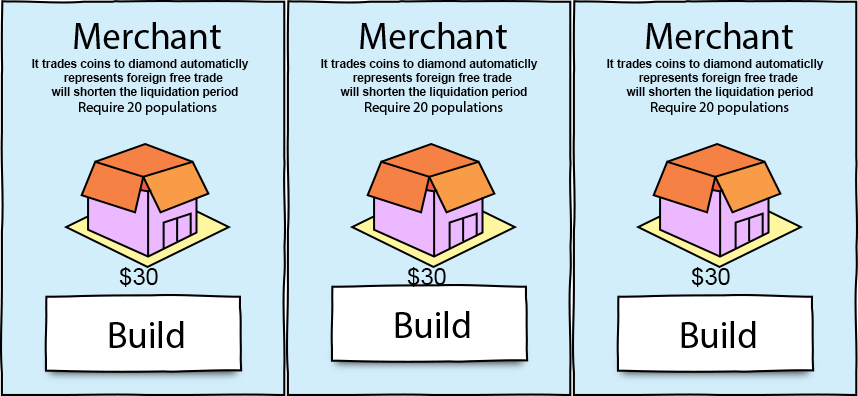
<style>
.page{position:relative;width:858px;height:396px;background:#d3eefb}
.page>*{position:absolute;margin:0}
.t1{font:12px "Arial-BoldMT";color:#000000}
.t2{font:24px "ArialMT";color:#000000}
</style>
<div class="page">
<p class="t1" style="left:32px;top:59px;width:217px;height:39px;text-align:center">It trades coins to diamond automaticlly <br>            represents foreign free trade<br>             will shorten the liquidation period</p>
<p class="t1" style="left:321px;top:59px;width:217px;height:39px;text-align:center">It trades coins to diamond automaticlly <br>            represents foreign free trade<br>             will shorten the liquidation period</p>
<p class="t1" style="left:607px;top:59px;width:217px;height:39px;text-align:center">It trades coins to diamond automaticlly<br>            represents foreign free trade<br>             will shorten the liquidation period</p>
<p class="t2" style="left:119px;top:267px;width:39px;height:20px">$30</p>
<p class="t2" style="left:407px;top:267px;width:39px;height:20px">$30</p>
<p class="t2" style="left:691px;top:267px;width:39px;height:20px">$30</p>
</div>
